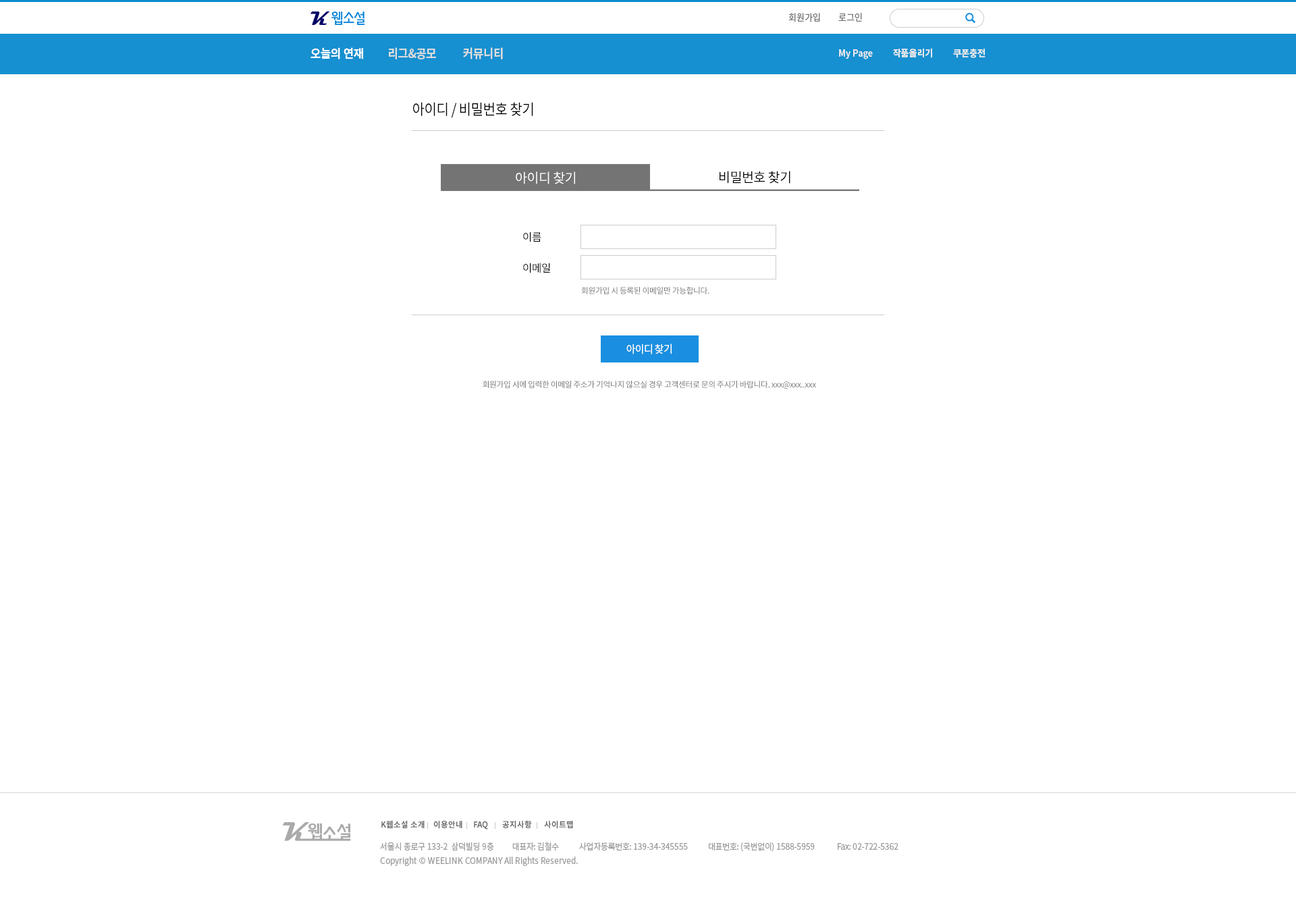
<style>
.page{position:relative;width:1296px;height:920px;background:#ffffff}
.page>*{position:absolute;margin:0}
.t1{font:9.5px "NotoSansCJKkr-Regular";letter-spacing:-0.002em;color:#727272;scale:0.92 1}
.t2{font:12.2px "NotoSansCJKkr-Bold";letter-spacing:-0.002em;color:#dddddd;scale:0.92 1}
.t3{font:12.2px "NotoSansCJKkr-Bold";letter-spacing:-0.002em;color:#ffffff;scale:0.92 1}
.t4{font:9.5px "NotoSansCJKkr-Bold";letter-spacing:-0.002em;color:#ececec;scale:0.92 1}
.t5{font:14.9px "NotoSansCJKkr-Regular";letter-spacing:-0.05em;color:#000000;scale:0.92 1}
.t6{font:13.5px "NotoSansCJKkr-Regular";letter-spacing:-0.03em;color:#ffffff}
.t7{font:13.5px "NotoSansCJKkr-Regular";letter-spacing:-0.03em;color:#000000}
.t8{font:10.8px "NotoSansCJKkr-Regular";letter-spacing:-0.03em;color:#000000}
.t9{font:8.1px "NotoSansCJKkr-Regular";letter-spacing:-0.03em;color:#747474}
.t10{font:10.8px "NotoSansCJKkr-Regular";letter-spacing:-0.05em;color:#ffffff;scale:0.92 1}
.t11{font:8.1px "NotoSansCJKkr-Bold";color:#666666;scale:0.96 1}
.t12{font:8.8px "NotoSansCJKkr-Regular";letter-spacing:-0.025em;color:#9d9d9d;scale:0.92 1}
.t13{font:8.8px "NotoSansCJKkr-Regular";color:#9d9d9d;scale:0.92 1}
</style>
<div class="page">
<p class="t1" style="left:788px;top:13px;width:32px;height:9px">회원가입</p>
<p class="t1" style="left:838px;top:13px;width:24px;height:9px">로그인</p>
<p class="t2" style="left:311px;top:47px;width:192px;height:12px"><span class="t3">오늘의 연재         </span>리그&amp;공모          커뮤니티</p>
<p class="t4" style="left:839px;top:48px;width:147px;height:11px">My Page          작품올리기          쿠폰충전</p>
<p class="t5" style="left:413px;top:102px;width:120px;height:15px">아이디 / 비밀번호 찾기</p>
<p class="t6" style="left:516px;top:171px;width:59px;height:13px">아이디 찾기</p>
<p class="t7" style="left:720px;top:171px;width:70px;height:13px">비밀번호 찾기</p>
<p class="t8" style="left:523px;top:232px;width:18px;height:10px">이름</p>
<p class="t8" style="left:523px;top:263px;width:27px;height:10px">이메일</p>
<p class="t9" style="left:581px;top:287px;width:128px;height:7px">회원가입 시 등록된 이메일만 가능합니다.</p>
<p class="t10" style="left:626px;top:344px;width:46px;height:10px">아이디 찾기</p>
<p class="t9" style="left:483px;top:381px;width:333px;height:8px">회원가입 시에 입력한 이메일 주소가 기억나지 않으실 경우 고객센터로 문의 주시기 바랍니다. xxx@xxx..xxx</p>
<p class="t11" style="left:381px;top:820px;width:44px;height:8px">K웹소설 소개</p>
<p class="t11" style="left:433px;top:821px;width:29px;height:8px">이용안내</p>
<p class="t11" style="left:474px;top:821px;width:14px;height:9px">FAQ</p>
<p class="t11" style="left:502px;top:820px;width:30px;height:8px">공지사항</p>
<p class="t11" style="left:544px;top:821px;width:29px;height:8px">사이트맵</p>
<p class="t12" style="left:380px;top:842px;width:518px;height:10px">서울시 종로구 133-2  삼덕빌딩 9층          대표자: 김철수           사업자등록번호: 139-34-345555           대표번호: (국번없이) 1588-5959            Fax: 02-722-5362</p>
<p class="t13" style="left:380px;top:856px;width:198px;height:10px"><span class="t12"><br><br></span>Copyright © WEELINK COMPANY All Rights Reserved.</p>
</div>
